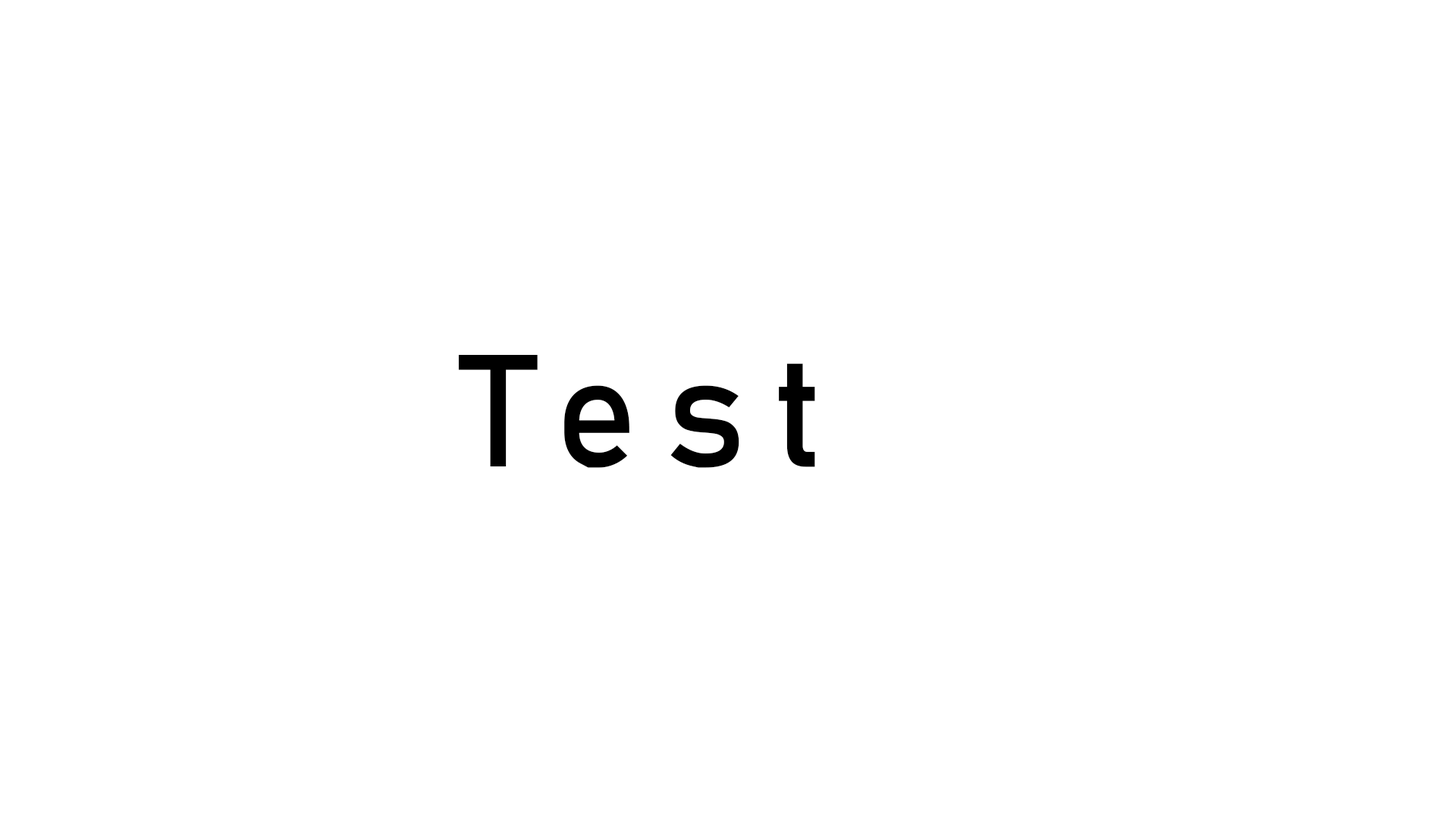
<style>
.page{position:relative;width:1456px;height:819px;background:#ffffff}
.page>*{position:absolute;margin:0}
.t1{font:157px "Bahnschrift";letter-spacing:0.17em;color:#000000}
</style>
<div class="page">
<p class="t1" style="left:458px;top:355px;width:357px;height:113px">Test</p>
</div>
